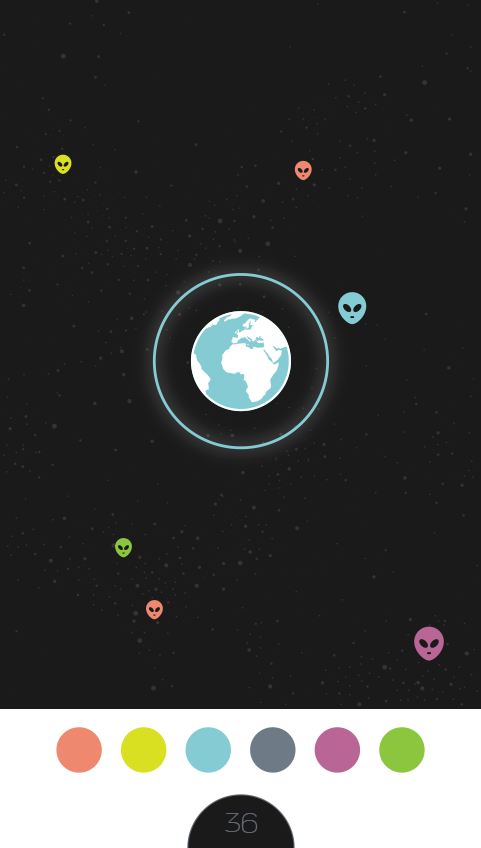
<style>
.page{position:relative;width:481px;height:848px;background:#1a1a1a}
.page>*{position:absolute;margin:0}
.t1{font:28px "CREW36";color:#5f6973}
</style>
<div class="page">
<p class="t1" style="left:225px;top:813px;width:33px;height:20px">36</p>
</div>
